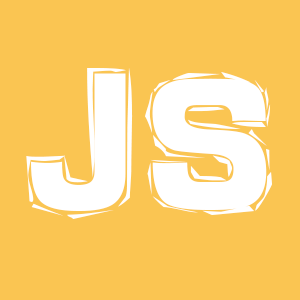
<style>
.page{position:relative;width:300px;height:300px;background:#fac552}
.page>*{position:absolute;margin:0}
.t1{font:200px "ARDARLING";color:#ffffff}
</style>
<div class="page">
<p class="t1" style="left:26px;top:68px;width:246px;height:151px">JS</p>
</div>
